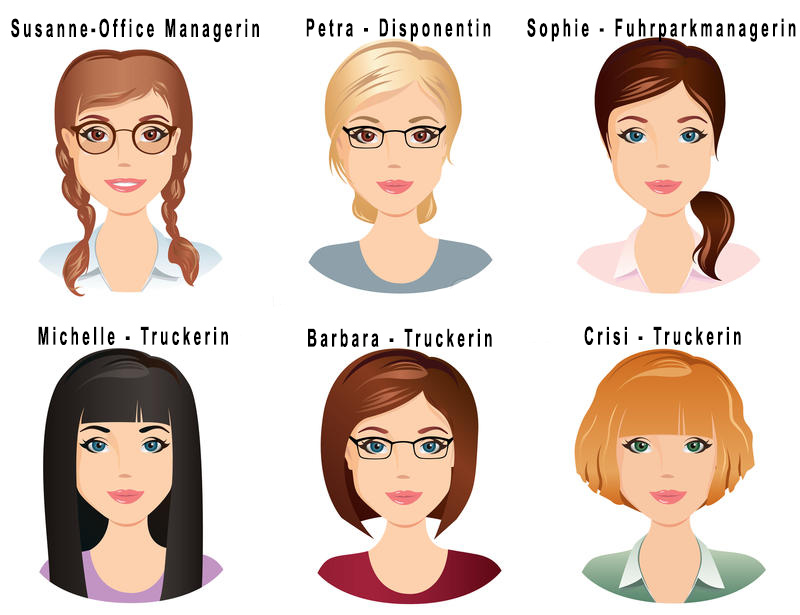
<style>
.page{position:relative;width:800px;height:615px;background:#ffffff}
.page>*{position:absolute;margin:0}
.t1{font:25px "ArialNarrow-Bold";letter-spacing:0.2em;color:#000000;scale:0.67 1}
</style>
<div class="page">
<p class="t1" style="left:11px;top:18px;width:248px;height:25px">Susanne-Office Managerin</p>
<p class="t1" style="left:306px;top:18px;width:185px;height:24px">Petra - Disponentin</p>
<p class="t1" style="left:527px;top:18px;width:269px;height:24px">Sophie - Fuhrparkmanagerin</p>
<p class="t1" style="left:38px;top:326px;width:190px;height:19px">Michelle - Truckerin</p>
<p class="t1" style="left:308px;top:328px;width:184px;height:19px">Barbara - Truckerin</p>
<p class="t1" style="left:584px;top:326px;width:157px;height:19px">Crisi - Truckerin</p>
</div>
